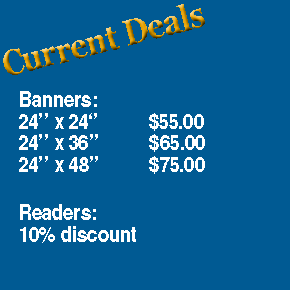
<style>
.page{position:relative;width:290px;height:290px;background:#005a93}
.page>*{position:absolute;margin:0}
.t1{font:36px "Georgia-Bold";letter-spacing:-0.025em;scale:0.83 1}
.t2{font:21.6px "Helvetica-Bold";color:#ffffff;scale:0.83 1}
</style>
<div class="page">
<p class="t1" style="left:3px;top:4px;width:202px;height:71px;rotate:-14deg">Current Deals</p>
<p class="t2" style="left:19px;top:91px;width:186px;height:83px">Banners:<br>24’’ x 24‘’          $55.00<br>24’’ x 36’’          $65.00<br>24’’ x 48’’          $75.00</p>
<p class="t2" style="left:20px;top:204px;width:116px;height:39px">Readers:<br>10% discount</p>
</div>
